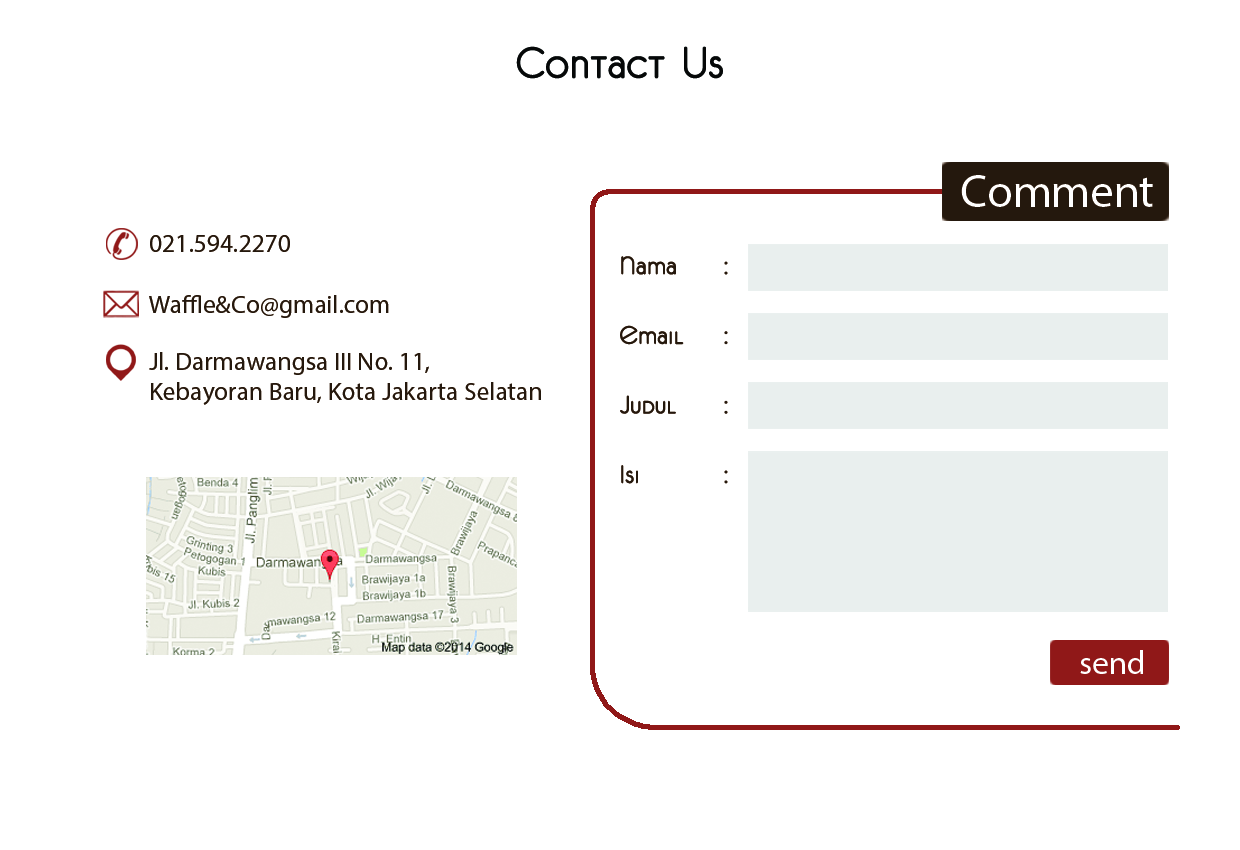
<style>
.page{position:relative;width:1240px;height:850px;background:#ffffff}
.page>*{position:absolute;margin:0}
.t1{font:50px "Unifur";color:#060808}
.t2{font:46.6px "MyriadPro-Regular";color:#ffffff}
.t3{font:25.2px "MyriadPro-Regular";color:#24180d}
.t4{font:29px "Unifur";color:#24180d}
.t5{font:33.2px "MyriadPro-Regular";color:#ffffff}
</style>
<div class="page">
<p class="t1" style="left:516px;top:46px;width:207px;height:33px">Contact Us</p>
<p class="t2" style="left:961px;top:175px;width:192px;height:32px">Comment</p>
<p class="t3" style="left:150px;top:235px;width:140px;height:17px">021.594.2270</p>
<p class="t4" style="left:620px;top:256px;width:108px;height:228px">Nama   :<br><br>Email  :<br><br>Judul   :<br><br>Isi     :</p>
<p class="t3" style="left:149px;top:295px;width:240px;height:23px">Waffle&amp;Co@gmail.com</p>
<p class="t3" style="left:149px;top:352px;width:392px;height:53px">Jl. Darmawangsa III No. 11, <br>Kebayoran Baru, Kota Jakarta Selatan</p>
<p class="t5" style="left:1080px;top:650px;width:63px;height:24px">send</p>
</div>
